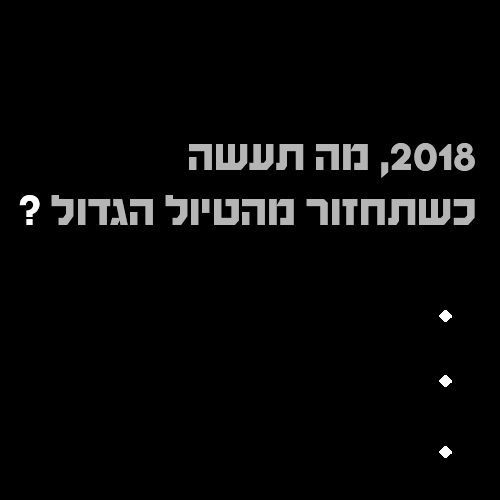
<style>
.page{position:relative;width:500px;height:500px;background:#000000}
.page>*{position:absolute;margin:0}
.t1{font:45.8px "HaimG-Regular";color:#b5b5b5}
.t2{font:45.8px "HaimG-Regular";color:#ffffff}
</style>
<div class="page">
<p class="t1" style="left:19px;top:143px;width:456px;height:82px">2018, מה תעשה כשתחזור מהטיול הגדול <span class="t2">?</span></p>
</div>
